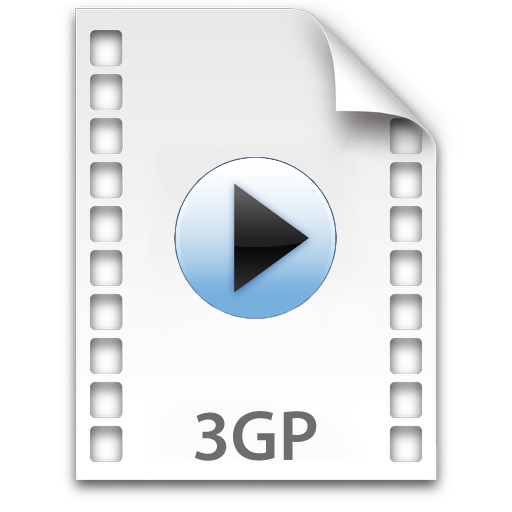
<style>
.page{position:relative;width:512px;height:512px;background:#ffffff}
.page>*{position:absolute;margin:0}
.t1{font:72px "MyriadPro-Semibold";color:#6e6d6d}
</style>
<div class="page">
<p class="t1" style="left:195px;top:411px;width:122px;height:50px">3GP</p>
</div>
